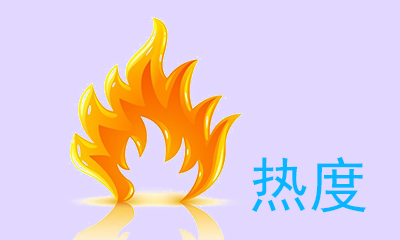
<style>
.page{position:relative;width:400px;height:240px;background:#e2d8ff}
.page>*{position:absolute;margin:0}
.t1{font:60px "SimHei";color:#06b6ff}
</style>
<div class="page">
<p class="t1" style="left:252px;top:156px;width:114px;height:57px">热度</p>
</div>
